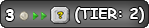
<style>
.page{position:relative;width:149px;height:28px}
.page>*{position:absolute;margin:0}
.t1{font:12px "ComicSansMS-Bold";color:#ffffff}
.t2{font:14.7px "ComicSansMS-Bold";color:#ffffff}
</style>
<div class="page">
<p class="t1" style="left:5px;top:9px;width:9px;height:12px">3</p>
<p class="t2" style="left:75px;top:7px;width:69px;height:16px">(TIER: 2)</p>
</div>
